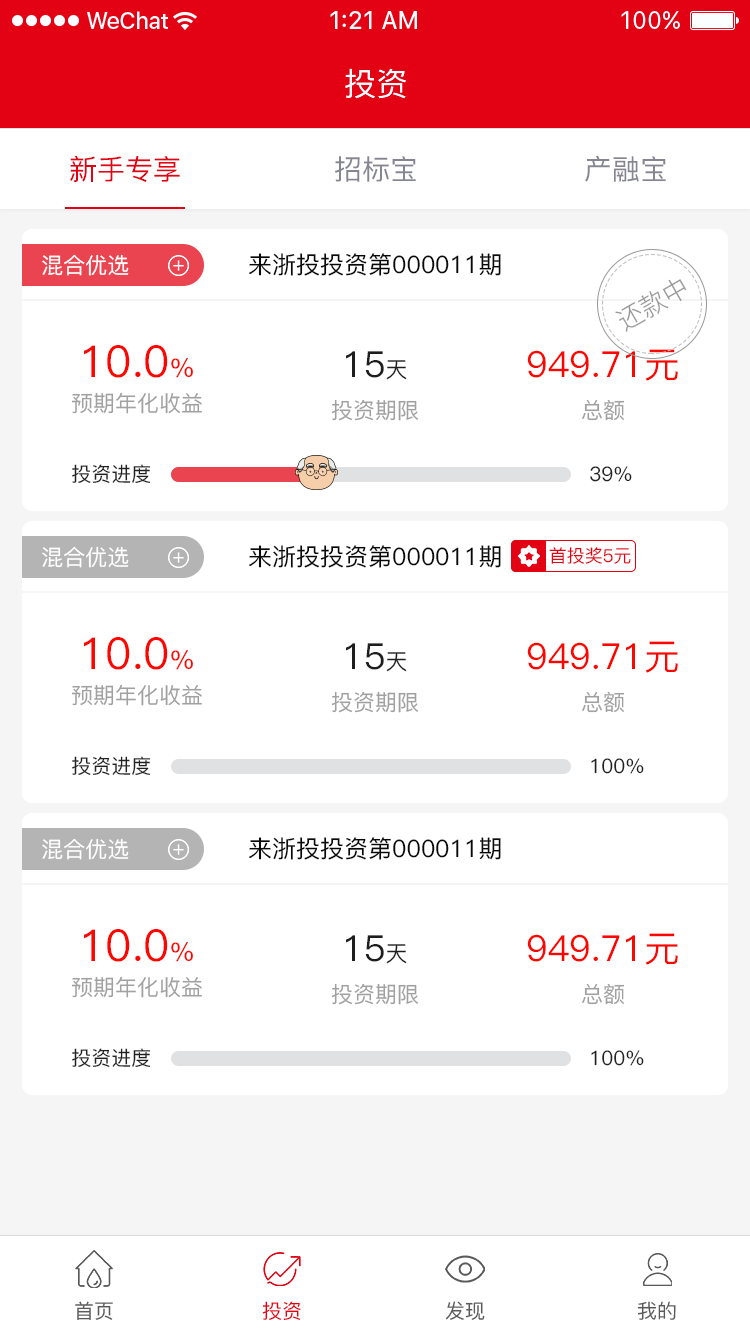
<style>
.page{position:relative;width:750px;height:1334px;background:#ffffff}
.page>*{position:absolute;margin:0}
.t1{font:32px "PingFang-SC-Medium";color:#ffffff}
.t2{font:28px "PingFang-SC-Medium";color:#e20214}
.t3{font:28px "PingFang-SC-Medium";color:#868693}
.t4{font:22px "PingFang-SC-Medium";color:#ffffff}
.t5{font:24px "PingFang-SC-Medium";color:#090909}
.t6{font:26px "PingFang-SC-Regular";color:#999999}
.t7{font:22px/53px "PingFang-SC-Medium";color:#a1a1a1}
.t8{font:44px/53px "PingFang-SC-Medium";color:#fb0600}
.t9{font:26px/53px "PingFang-SC-Medium";color:#fb0600}
.t10{font:36px/53px "PingFang-SC-Medium";color:#1e1e1e}
.t11{font:22px/53px "PingFang-SC-Medium";color:#1e1e1e}
.t12{font:36px/53px "PingFang-SC-Medium";color:#fb0600}
.t13{font:20px "PingFang-SC-Medium";color:#222222}
.t14{font:18px "PingFang-SC-Medium";color:#e20214}
.t15{font:20px "PingFang-SC-Medium";color:#5a5a5a}
.t16{font:20px "PingFang-SC-Medium";color:#e20214}
</style>
<div class="page">
<p class="t1" style="left:345px;top:68px;width:61px;height:31px">投资</p>
<p class="t2" style="left:70px;top:155px;width:110px;height:27px">新手专享</p>
<p class="t3" style="left:335px;top:156px;width:81px;height:26px">招标宝</p>
<p class="t3" style="left:585px;top:155px;width:81px;height:27px">产融宝</p>
<p class="t4" style="left:42px;top:254px;width:87px;height:22px">混合优选</p>
<p class="t5" style="left:249px;top:253px;width:252px;height:23px">来浙投投资第000011期</p>
<p class="t6" style="left:615px;top:279px;width:72px;height:53px;rotate:-30deg">还款中</p>
<p class="t7" style="left:71px;top:345px;width:131px;height:69px;text-align:center"><span class="t8">10.0</span><span class="t9">%<br></span>预期年化收益</p>
<p class="t7" style="left:331px;top:351px;width:88px;height:70px;text-align:center"><span class="t10">15</span><span class="t11">天<br></span>投资期限</p>
<p class="t12" style="left:527px;top:349px;width:151px;height:72px;text-align:center">949.71元<br><span class="t7">总额</span></p>
<p class="t13" style="left:72px;top:464px;width:79px;height:19px">投资进度</p>
<p class="t13" style="left:590px;top:466px;width:42px;height:16px">39%</p>
<p class="t5" style="left:249px;top:545px;width:252px;height:23px">来浙投投资第000011期</p>
<p class="t4" style="left:42px;top:546px;width:87px;height:22px">混合优选</p>
<p class="t14" style="left:549px;top:547px;width:82px;height:17px">首投奖5元</p>
<p class="t7" style="left:71px;top:637px;width:131px;height:69px;text-align:center"><span class="t8">10.0</span><span class="t9">%<br></span>预期年化收益</p>
<p class="t12" style="left:527px;top:641px;width:151px;height:72px;text-align:center">949.71元<br><span class="t7">总额</span></p>
<p class="t7" style="left:331px;top:643px;width:88px;height:70px;text-align:center"><span class="t10">15</span><span class="t11">天<br></span>投资期限</p>
<p class="t13" style="left:72px;top:756px;width:79px;height:19px">投资进度</p>
<p class="t13" style="left:591px;top:758px;width:53px;height:16px">100%</p>
<p class="t4" style="left:42px;top:838px;width:87px;height:22px">混合优选</p>
<p class="t5" style="left:249px;top:837px;width:252px;height:23px">来浙投投资第000011期</p>
<p class="t7" style="left:71px;top:929px;width:131px;height:69px;text-align:center"><span class="t8">10.0</span><span class="t9">%<br></span>预期年化收益</p>
<p class="t7" style="left:331px;top:935px;width:88px;height:70px;text-align:center"><span class="t10">15</span><span class="t11">天<br></span>投资期限</p>
<p class="t12" style="left:527px;top:933px;width:151px;height:72px;text-align:center">949.71元<br><span class="t7">总额</span></p>
<p class="t13" style="left:72px;top:1048px;width:79px;height:19px">投资进度</p>
<p class="t13" style="left:591px;top:1050px;width:53px;height:16px">100%</p>
<p class="t15" style="left:75px;top:1301px;width:38px;height:19px">首页</p>
<p class="t16" style="left:262px;top:1301px;width:39px;height:20px">投资</p>
<p class="t15" style="left:445px;top:1301px;width:40px;height:19px">发现</p>
<p class="t15" style="left:637px;top:1301px;width:39px;height:19px">我的</p>
</div>
